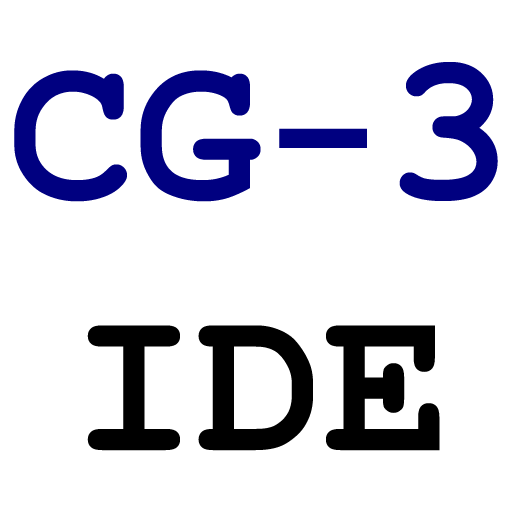
<style>
.page{position:relative;width:512px;height:512px;background:#ffffff}
.page>*{position:absolute;margin:0}
.t1{font:210px "CourierNewPS-BoldMT";color:#000080}
.t2{font:210px "CourierNewPS-BoldMT";color:#000000}
</style>
<div class="page">
<p class="t1" style="left:14px;top:62px;width:484px;height:389px;text-align:center">CG-3<br><span class="t2">IDE</span></p>
</div>
